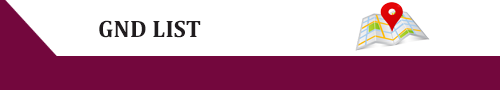
<style>
.page{position:relative;width:500px;height:90px;background:#ffffff}
.page>*{position:absolute;margin:0}
.t1{font:24px "Cambria-Bold";color:#201c1e}
</style>
<div class="page">
<p class="t1" style="left:99px;top:20px;width:102px;height:18px">GND LIST</p>
</div>
